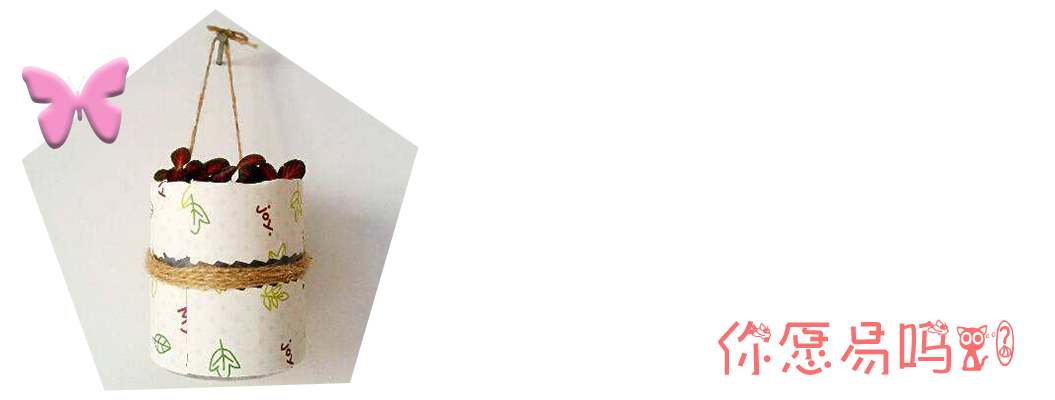
<style>
.page{position:relative;width:1055px;height:400px;background:#ffffff}
.page>*{position:absolute;margin:0}
.t1{font:60px "STHeitiTC-Light";color:#fa6f6f}
</style>
<div class="page">
<p class="t1" style="left:718px;top:319px;width:296px;height:56px">你愿易吗？</p>
</div>
